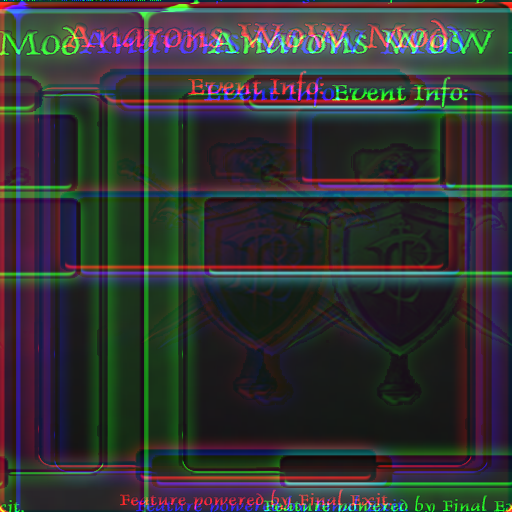
<style>
.page{position:relative;width:512px;height:512px}
.page>*{position:absolute;margin:0}
.t1{font:37.3px "Skurri";scale:1.33 1}
.t2{font:24px "Skurri";scale:1.33 1}
.t3{font:16px "Skurri";letter-spacing:0.04em;scale:1.33 1}
</style>
<div class="page">
<p class="t1" style="left:63px;top:17px;width:386px;height:30px">Anarons WoW Mod</p>
<p class="t2" style="left:188px;top:68px;width:136px;height:32px">Event Info:</p>
<p class="t3" style="left:120px;top:487px;width:272px;height:21px">Feature powered by Final Exit.</p>
</div>
